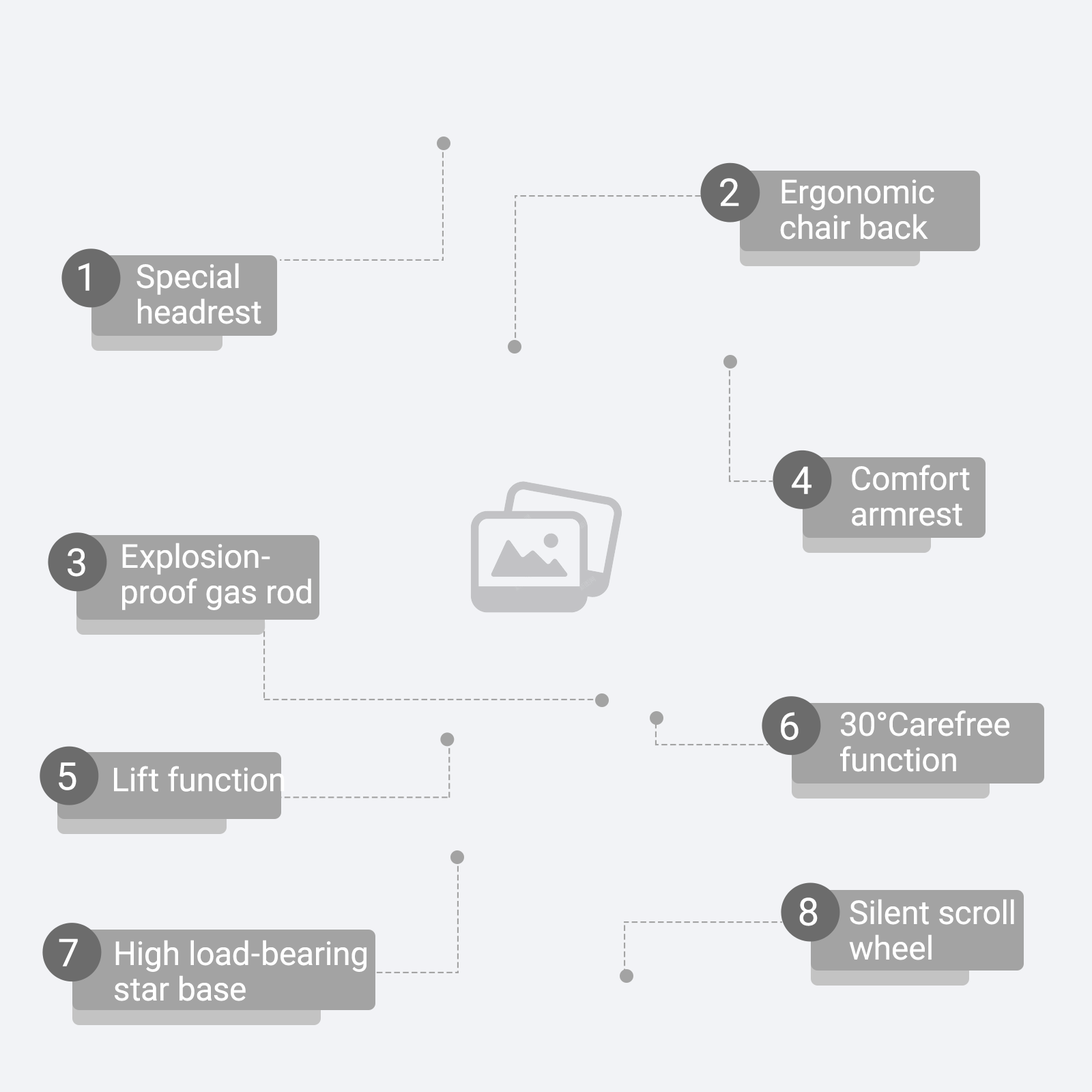
<style>
.page{position:relative;width:1092px;height:1092px;background:#f2f3f6}
.page>*{position:absolute;margin:0}
.t1{font:38.2px "Roboto-Regular";color:#ffffff}
.t2{font:32.8px/35.5px "Roboto-Regular";color:#ffffff}
.t3{font:32.8px "Roboto-Regular";color:#ffffff}
</style>
<div class="page">
<p class="t1" style="left:720px;top:178px;width:19px;height:28px">2</p>
<p class="t2" style="left:780px;top:179px;width:154px;height:61px">Ergonomic<br>chair back</p>
<p class="t1" style="left:78px;top:263px;width:11px;height:28px">1</p>
<p class="t2" style="left:136px;top:263px;width:125px;height:61px">Special<br>headrest</p>
<p class="t1" style="left:792px;top:466px;width:19px;height:28px">4</p>
<p class="t2" style="left:852px;top:465px;width:118px;height:61px">Comfort<br>armrest</p>
<p class="t2" style="left:122px;top:543px;width:189px;height:67px">Explosion-<br>proof gas rod</p>
<p class="t1" style="left:68px;top:548px;width:17px;height:29px">3</p>
<p class="t1" style="left:781px;top:712px;width:18px;height:29px">6</p>
<p class="t2" style="left:840px;top:710px;width:169px;height:62px">30°Carefree<br>function</p>
<p class="t1" style="left:59px;top:762px;width:17px;height:28px">5</p>
<p class="t3" style="left:114px;top:766px;width:171px;height:26px">Lift function</p>
<p class="t1" style="left:799px;top:897px;width:19px;height:29px">8</p>
<p class="t2" style="left:849px;top:899px;width:165px;height:61px">Silent scroll<br>wheel</p>
<p class="t1" style="left:59px;top:938px;width:19px;height:28px">7</p>
<p class="t2" style="left:115px;top:940px;width:251px;height:61px">High load-bearing<br>star base</p>
</div>
